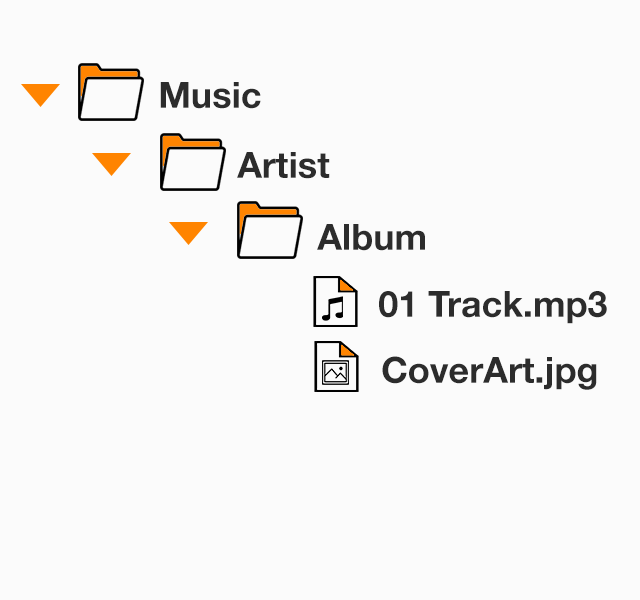
<style>
.page{position:relative;width:640px;height:600px;background:#fbfbfb}
.page>*{position:absolute;margin:0}
.t1{font:36px "HelveticaNeue-Bold";color:#2c2c2c}
</style>
<div class="page">
<p class="t1" style="left:160px;top:82px;width:101px;height:27px">Music</p>
<p class="t1" style="left:237px;top:152px;width:93px;height:27px">Artist</p>
<p class="t1" style="left:317px;top:224px;width:108px;height:27px">Album</p>
<p class="t1" style="left:379px;top:291px;width:228px;height:33px">01 Track.mp3</p>
<p class="t1" style="left:382px;top:356px;width:215px;height:34px">CoverArt.jpg</p>
</div>
